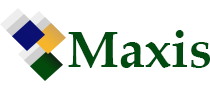
<style>
.page{position:relative;width:210px;height:90px;background:#ffffff}
.page>*{position:absolute;margin:0}
.t1{font:52.2px "BookAntiqua-Bold";color:#014b10}
</style>
<div class="page">
<p class="t1" style="left:68px;top:30px;width:143px;height:38px">Maxis</p>
</div>
